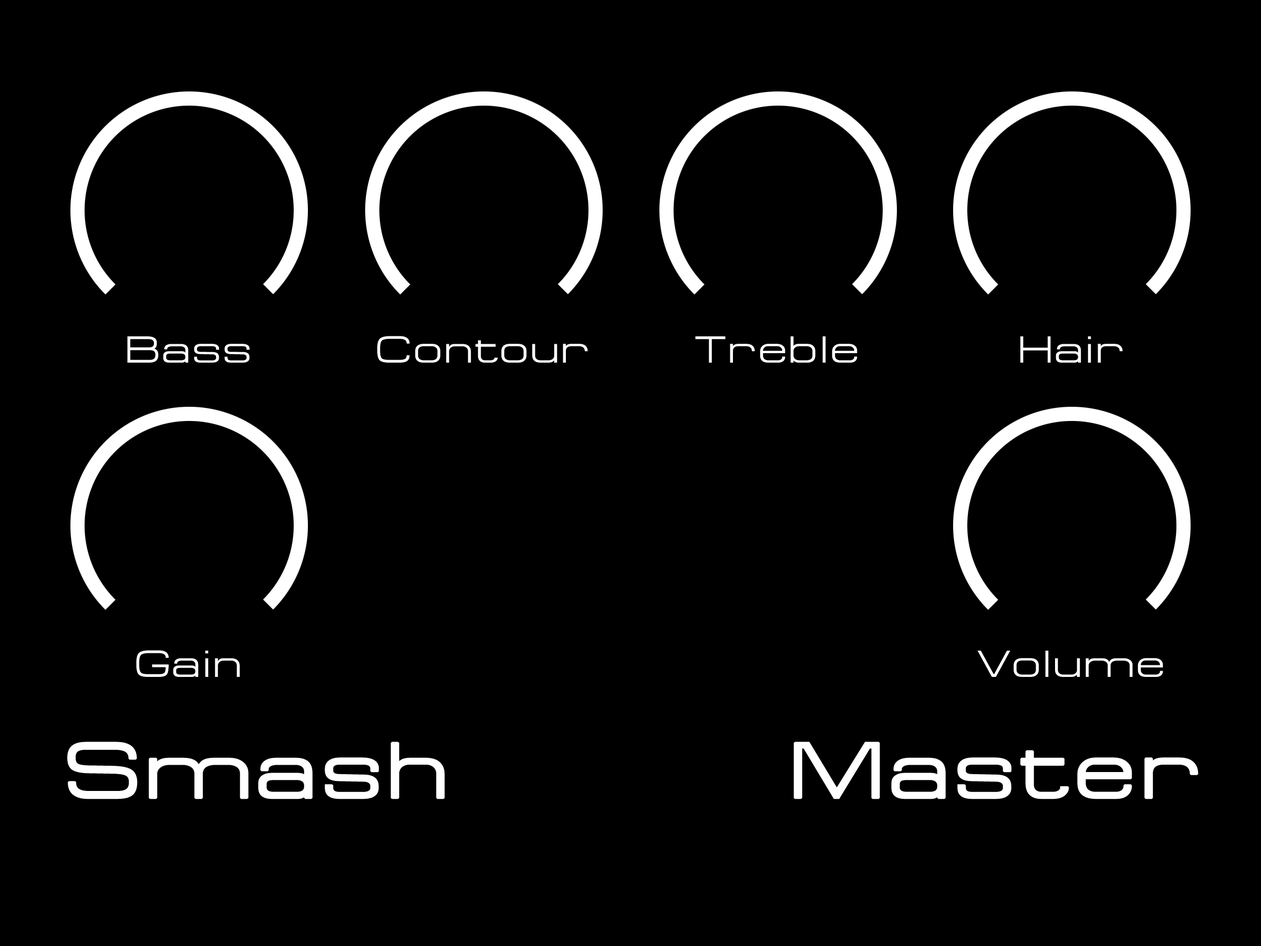
<style>
.page{position:relative;width:1261px;height:946px;background:#000000}
.page>*{position:absolute;margin:0}
.t1{font:37.8px "Federation";letter-spacing:0.05em;color:#ffffff}
.t2{font:78.8px "Federation";letter-spacing:0.05em;color:#ffffff;font-weight:bold}
</style>
<div class="page">
<p class="t1" style="left:127px;top:336px;width:123px;height:27px">Bass</p>
<p class="t1" style="left:377px;top:336px;width:211px;height:27px">Contour</p>
<p class="t1" style="left:695px;top:336px;width:162px;height:27px">Treble</p>
<p class="t1" style="left:1020px;top:336px;width:103px;height:27px">Hair</p>
<p class="t1" style="left:136px;top:650px;width:104px;height:27px">Gain</p>
<p class="t1" style="left:977px;top:650px;width:186px;height:27px">Volume</p>
<p class="t2" style="left:67px;top:741px;width:378px;height:58px">Smash</p>
<p class="t2" style="left:793px;top:741px;width:405px;height:58px">Master</p>
</div>
